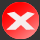
<style>
.page{position:relative;width:40px;height:40px;background:#333333}
.page>*{position:absolute;margin:0}
.t1{font:33px "HGSoeiKakupoptai";color:#f6eded;scale:1.91 1}
</style>
<div class="page">
<p class="t1" style="left:6px;top:11px;width:29px;height:19px">x</p>
</div>
